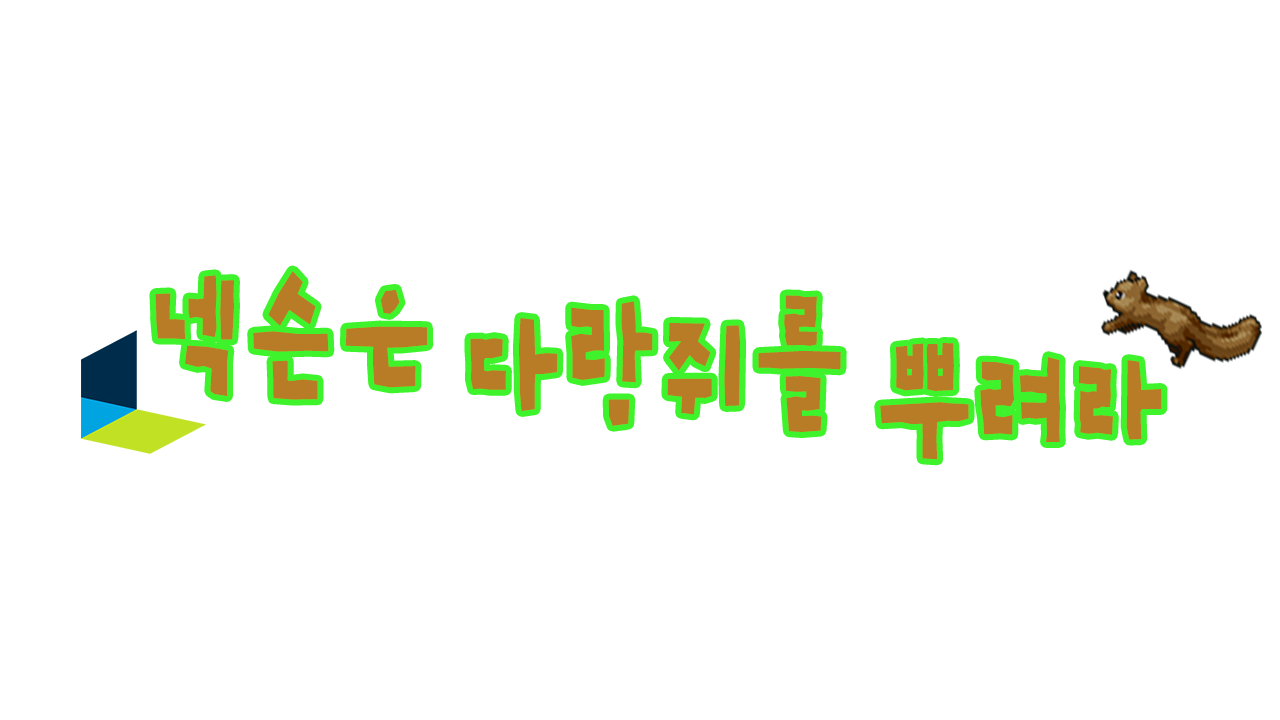
<style>
.page{position:relative;width:1280px;height:720px;background:#ffffff}
.page>*{position:absolute;margin:0}
.t1{font:144px "SDLeedongjin-dBd";color:#b87c26;scale:0.67 1}
</style>
<div class="page">
<p class="t1" style="left:155px;top:271px;width:273px;height:129px">넥슨은</p>
<p class="t1" style="left:470px;top:295px;width:371px;height:137px">다람쥐를</p>
<p class="t1" style="left:880px;top:343px;width:282px;height:117px">뿌려라</p>
</div>
